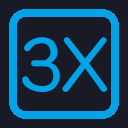
<style>
.page{position:relative;width:128px;height:128px;background:#181a26}
.page>*{position:absolute;margin:0}
.t1{font:80px "©M¥­²Ê¶ê";color:#00a2e8}
</style>
<div class="page">
<p class="t1" style="left:22px;top:37px;width:85px;height:55px">3X</p>
</div>
